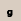
<style>
.page{position:relative;width:21px;height:21px;background:#d9cdc1}
.page>*{position:absolute;margin:0}
.t1{font:9px "Tahoma-Bold";color:#000000}
</style>
<div class="page">
<p class="t1" style="left:7px;top:10px;width:6px;height:7px">g</p>
</div>
